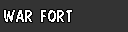
<style>
.page{position:relative;width:128px;height:32px;background:#333333}
.page>*{position:absolute;margin:0}
.t1{font:17.2px "DomCasualBT-Regular";letter-spacing:-0.025em;color:#ffffff;scale:1.05 1}
.t2{font:17.2px "DomCasualBT-Regular";letter-spacing:0.05em;color:#ffffff;scale:1.05 1}
</style>
<div class="page">
<p class="t1" style="left:4px;top:10px;width:68px;height:12px"><span class="t2"><br></span>WA<span class="t2">R </span>FO<span class="t2">RT</span></p>
</div>
